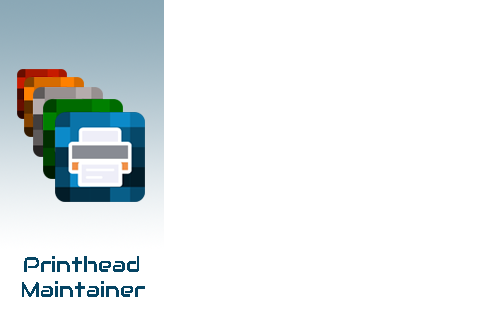
<style>
.page{position:relative;width:493px;height:312px;background:#ffffff}
.page>*{position:absolute;margin:0}
.t1{font:20.8px/25px "Audiowide-Regular";color:#054463}
</style>
<div class="page">
<p class="t1" style="left:22px;top:256px;width:123px;height:41px;text-align:center">Printhead<br>Maintainer</p>
</div>
